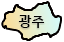
<style>
.page{position:relative;width:64px;height:42px;background:#ffffff}
.page>*{position:absolute;margin:0}
.t1{font:14px "HancomGothicBold";color:#000000}
</style>
<div class="page">
<p class="t1" style="left:18px;top:15px;width:27px;height:13px">광주</p>
</div>
